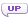
<style>
.page{position:relative;width:28px;height:18px;background:#ffffff}
.page>*{position:absolute;margin:0}
.t1{font:8px "Sevenet7";color:#864fc0;font-weight:bold}
</style>
<div class="page">
<p class="t1" style="left:8px;top:6px;width:13px;height:5px">UP</p>
</div>
